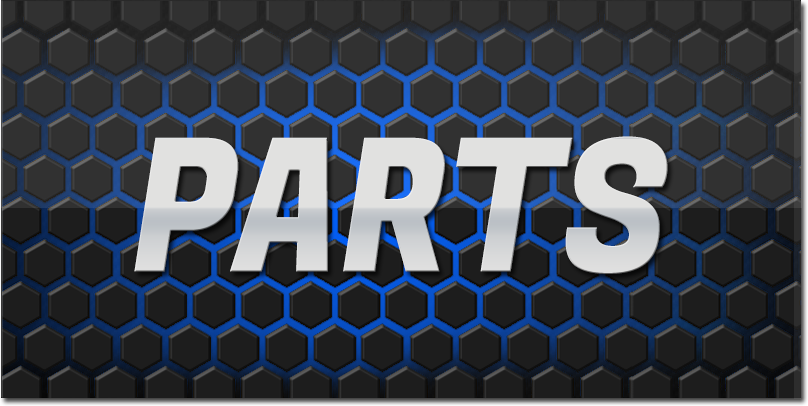
<style>
.page{position:relative;width:808px;height:406px;background:#313131}
.page>*{position:absolute;margin:0}
.t1{font:185.2px "FugazOne-Regular";color:#dfdfdf;scale:0.89 1}
</style>
<div class="page">
<p class="t1" style="left:134px;top:136px;width:534px;height:138px">PARTS</p>
</div>
